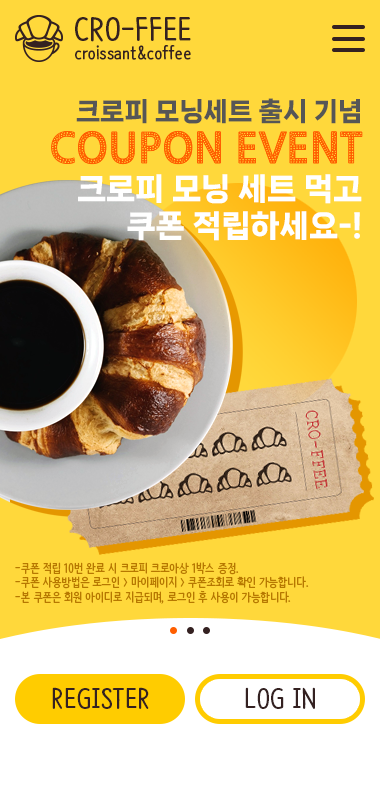
<style>
.page{position:relative;width:380px;height:796px;background:#ffd83b}
.page>*{position:absolute;margin:0}
.t1{font:30px "NanumBarunpenOTF-Bold";color:#342121}
.t2{font:17.3px "NanumBarunpenOTF-Bold";color:#342121}
.t3{font:30.7px "NanumSquareNeoTTF-eHv";color:#ffffff}
.t4{font:25.6px/42px "NanumSquareNeoTTF-eHv";color:#565656}
.t5{font:41px/42px "NanumGothicOTFEcoExtraBold";color:#ff5e00}
.t6{font:12px "NanumBarunpenOTF-Bold";color:#b77800}
.t7{font:26.2px "NanumBarunpenOTF-Bold";color:#342121}
</style>
<div class="page">
<p class="t1" style="left:75px;top:17px;width:116px;height:25px">CRO-FFEE</p>
<p class="t2" style="left:75px;top:45px;width:116px;height:15px">croissant&amp;coffee</p>
<p class="t3" style="left:51px;top:98px;width:312px;height:143px;text-align:right"><span class="t4">크로피 모닝세트 출시 기념<br></span><span class="t5">COUPON EVENT<br></span>크로피 모닝 세트 먹고<br>쿠폰 적립하세요-!</p>
<p class="t6" style="left:15px;top:562px;width:294px;height:42px">-쿠폰 적립 10번 완료 시 크로피 크로아상 1박스 증정.<br>-쿠폰 사용방법은 로그인 &gt; 마이페이지 &gt; 쿠폰조회로 확인 가능합니다.<br>-본 쿠폰은 회원 아이디로 지급되며, 로그인 후 사용이 가능합니다.</p>
<p class="t7" style="left:52px;top:687px;width:97px;height:22px">REGISTER</p>
<p class="t7" style="left:245px;top:687px;width:70px;height:22px">LOG IN</p>
</div>
